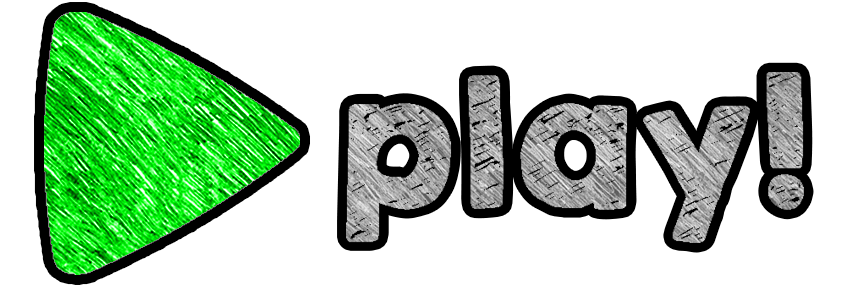
<style>
.page{position:relative;width:842px;height:287px;background:#ffffff}
.page>*{position:absolute;margin:0}
.t1{font:173px "KGBrokenVesselsSketch";letter-spacing:0.05em;color:#000000}
</style>
<div class="page">
<p class="t1" style="left:347px;top:72px;width:457px;height:171px">play!</p>
</div>
